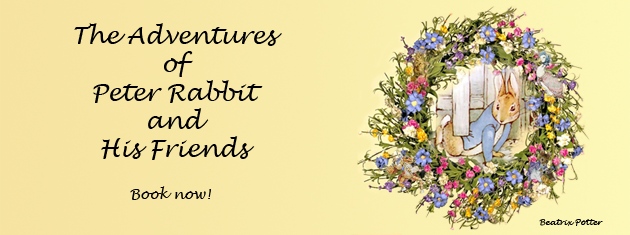
<style>
.page{position:relative;width:630px;height:235px}
.page>*{position:absolute;margin:0}
.t1{font:23.6px "LucidaHandwriting-Italic";color:#000000}
.t2{font:14px "LucidaHandwriting-Italic";color:#000000}
.t3{font:7.9px "LucidaHandwriting-Italic";color:#000000}
</style>
<div class="page">
<p class="t1" style="left:74px;top:23px;width:208px;height:137px;text-align:center">The Adventures<br>of<br>Peter Rabbit<br>and<br>His Friends</p>
<p class="t2" style="left:130px;top:186px;width:81px;height:14px">Book now!</p>
<p class="t3" style="left:539px;top:219px;width:64px;height:7px">Beatrix Potter</p>
</div>
